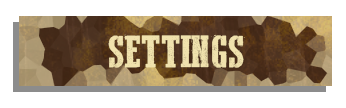
<style>
.page{position:relative;width:346px;height:108px;background:#ffffff}
.page>*{position:absolute;margin:0}
.t1{font:46.7px "WesternBangBang";color:#f0e2ad}
</style>
<div class="page">
<p class="t1" style="left:108px;top:34px;width:137px;height:34px">SETTINGS</p>
</div>
